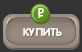
<style>
.page{position:relative;width:82px;height:52px;background:#333333}
.page>*{position:absolute;margin:0}
.t1{font:10px "RotondaC-Bold";letter-spacing:0.06em;color:#fbfdf5;text-transform:uppercase}
</style>
<div class="page">
<p class="t1" style="left:23px;top:28px;width:39px;height:8px">купить</p>
</div>
